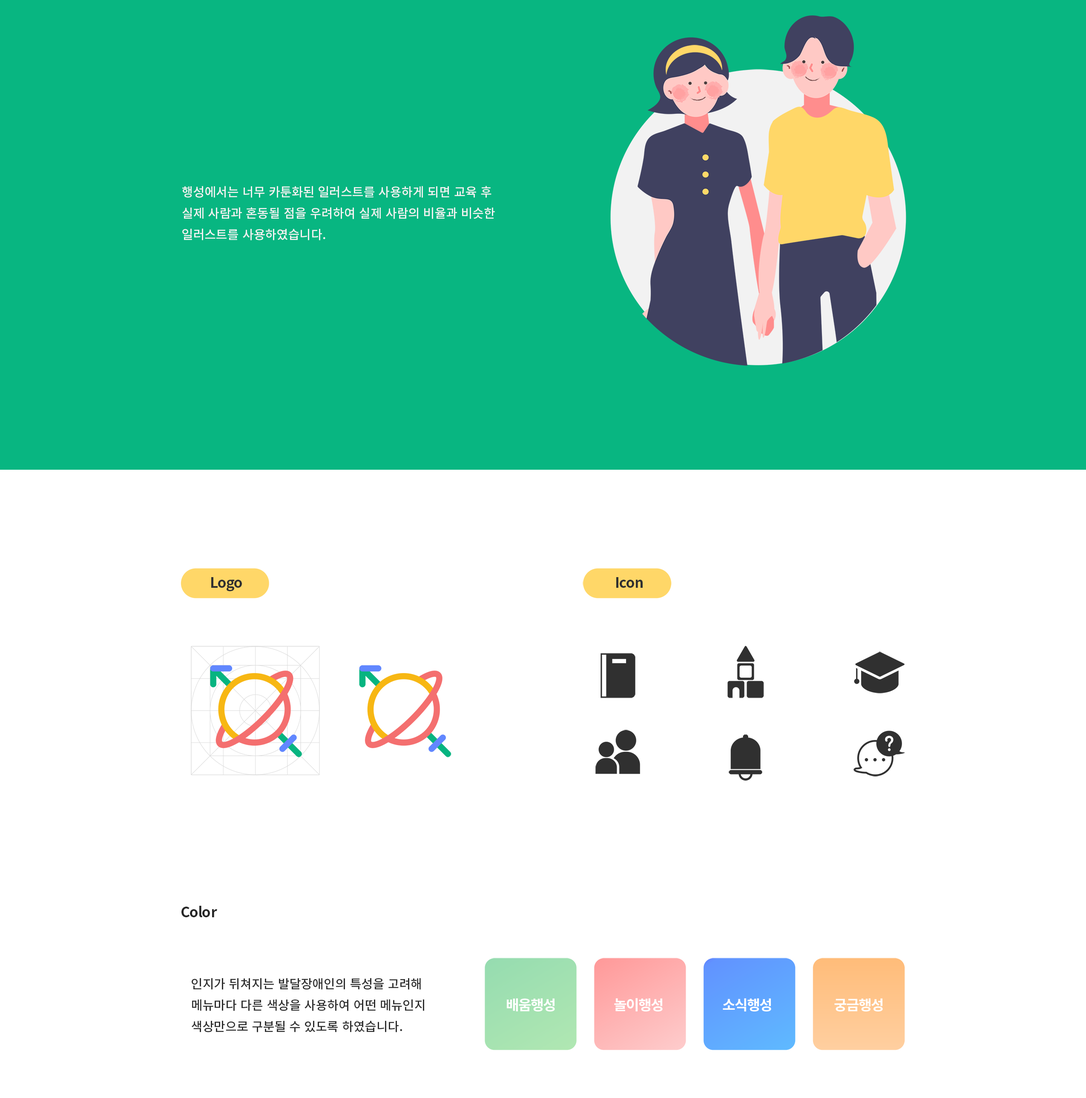
<style>
.page{position:relative;width:1086px;height:1098px;background:#ffffff}
.page>*{position:absolute;margin:0}
.t1{font:12.4px/21.3px "NotoSansCJKkr-Medium";color:#f2f2f2}
.t2{font:14.2px "NotoSansCJKkr-Bold";letter-spacing:-0.025em;color:#303030}
.t3{font:14.2px "NotoSansCJKkr-Bold";letter-spacing:-0.025em;color:#262626}
.t4{font:12.4px/21.3px "NotoSansCJKkr-Medium";color:#303030}
.t5{font:14.2px "NotoSansCJKkr-Bold";letter-spacing:-0.05em;color:#ffffff}
</style>
<div class="page">
<p class="t1" style="left:182px;top:186px;width:313px;height:54px">행성에서는 너무 카툰화된 일러스트를 사용하게 되면 교육 후<br>실제 사람과 혼동될 점을 우려하여 실제 사람의 비율과 비슷한<br>일러스트를 사용하였습니다.</p>
<p class="t2" style="left:211px;top:577px;width:31px;height:14px">Logo</p>
<p class="t2" style="left:617px;top:577px;width:26px;height:11px">Icon</p>
<p class="t3" style="left:182px;top:905px;width:35px;height:12px">Color</p>
<p class="t4" style="left:192px;top:977px;width:232px;height:55px">인지가 뒤쳐지는 발달장애인의 특성을 고려해<br>메뉴마다 다른 색상을 사용하여 어떤 메뉴인지<br>색상만으로 구분될 수 있도록 하였습니다.</p>
<p class="t5" style="left:507px;top:998px;width:48px;height:13px">배움행성</p>
<p class="t5" style="left:614px;top:997px;width:49px;height:14px">놀이행성</p>
<p class="t5" style="left:723px;top:998px;width:49px;height:13px">소식행성</p>
<p class="t5" style="left:835px;top:998px;width:48px;height:13px">궁금행성</p>
</div>
